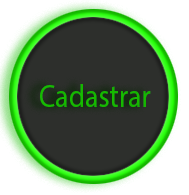
<style>
.page{position:relative;width:189px;height:195px;background:#2d2f2c}
.page>*{position:absolute;margin:0}
.t1{font:32px "MyriadPro-Regular";color:#16bc00;scale:0.89 1}
</style>
<div class="page">
<p class="t1" style="left:40px;top:84px;width:111px;height:23px">Cadastrar</p>
</div>
